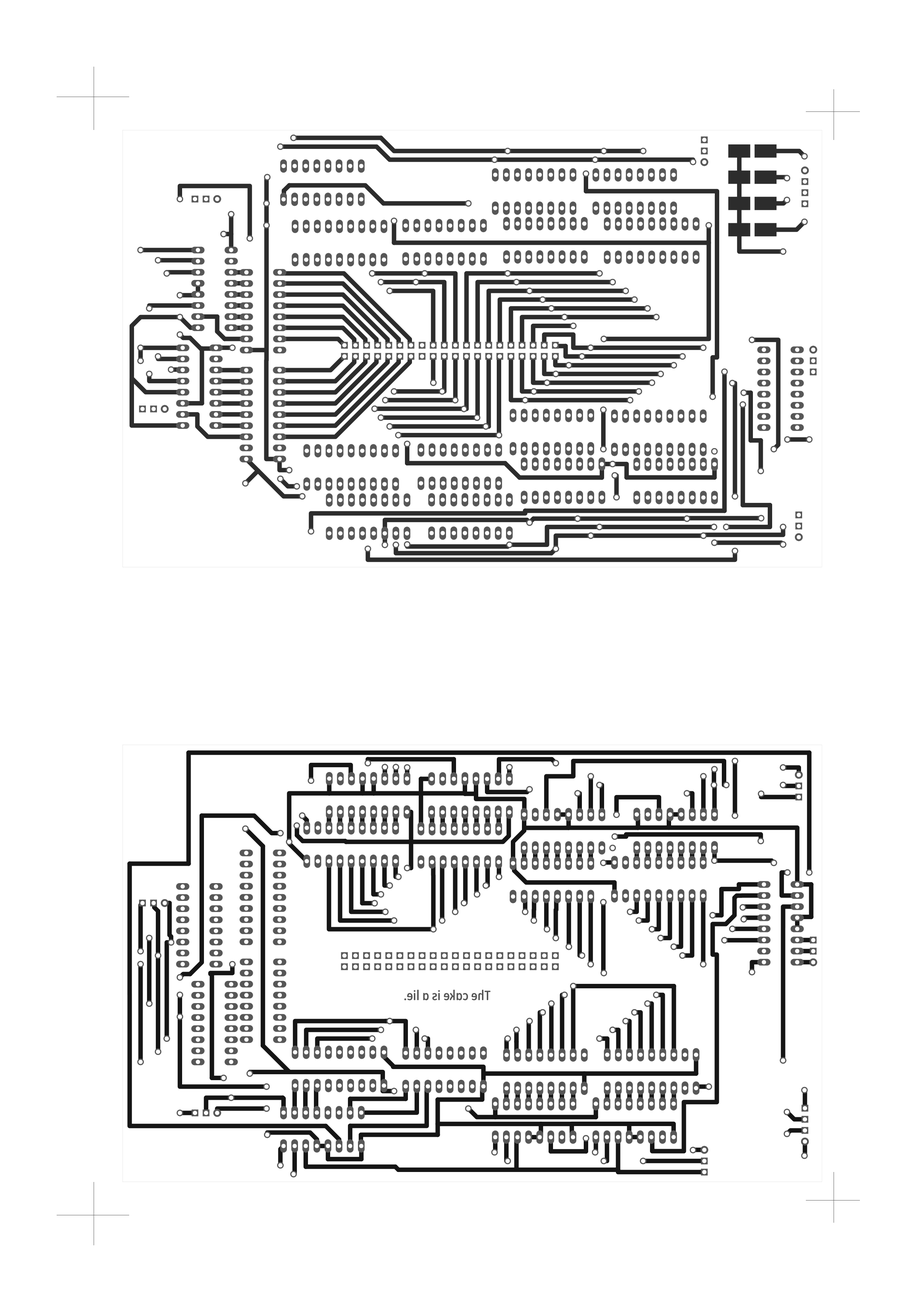
<style>
.page{position:relative;width:918px;height:1299px;background:#ffffff}
.page>*{position:absolute;margin:0}
.t1{font:13.9px "GEInspiraCond-Bold";color:#565656}
</style>
<div class="page">
<p class="t1" style="left:404px;top:989px;width:87px;height:11px;rotate:180deg">The cake is a lie.</p>
</div>
